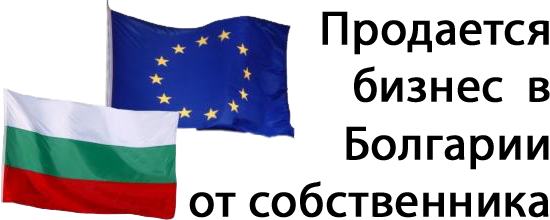
<style>
.page{position:relative;width:550px;height:220px;background:#ffffff}
.page>*{position:absolute;margin:0}
.t1{font:48px "MyriadPro-Regular";color:#000000;font-weight:bold}
</style>
<div class="page">
<p class="t1" style="left:189px;top:11px;width:361px;height:207px;text-align:right">Продается<br>          бизнес в<br>              Болгарии<br>от собственника</p>
</div>
